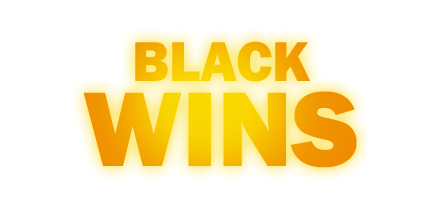
<style>
.page{position:relative;width:442px;height:208px;background:#ffffff}
.page>*{position:absolute;margin:0}
.t1{font:58px/85px "FranklinGothic-Heavy"}
.t2{font:110px/85px "FranklinGothic-Heavy"}
</style>
<div class="page">
<p class="t1" style="left:83px;top:41px;width:274px;height:127px;text-align:center">BLACK<br><span class="t2">WINS</span></p>
</div>
